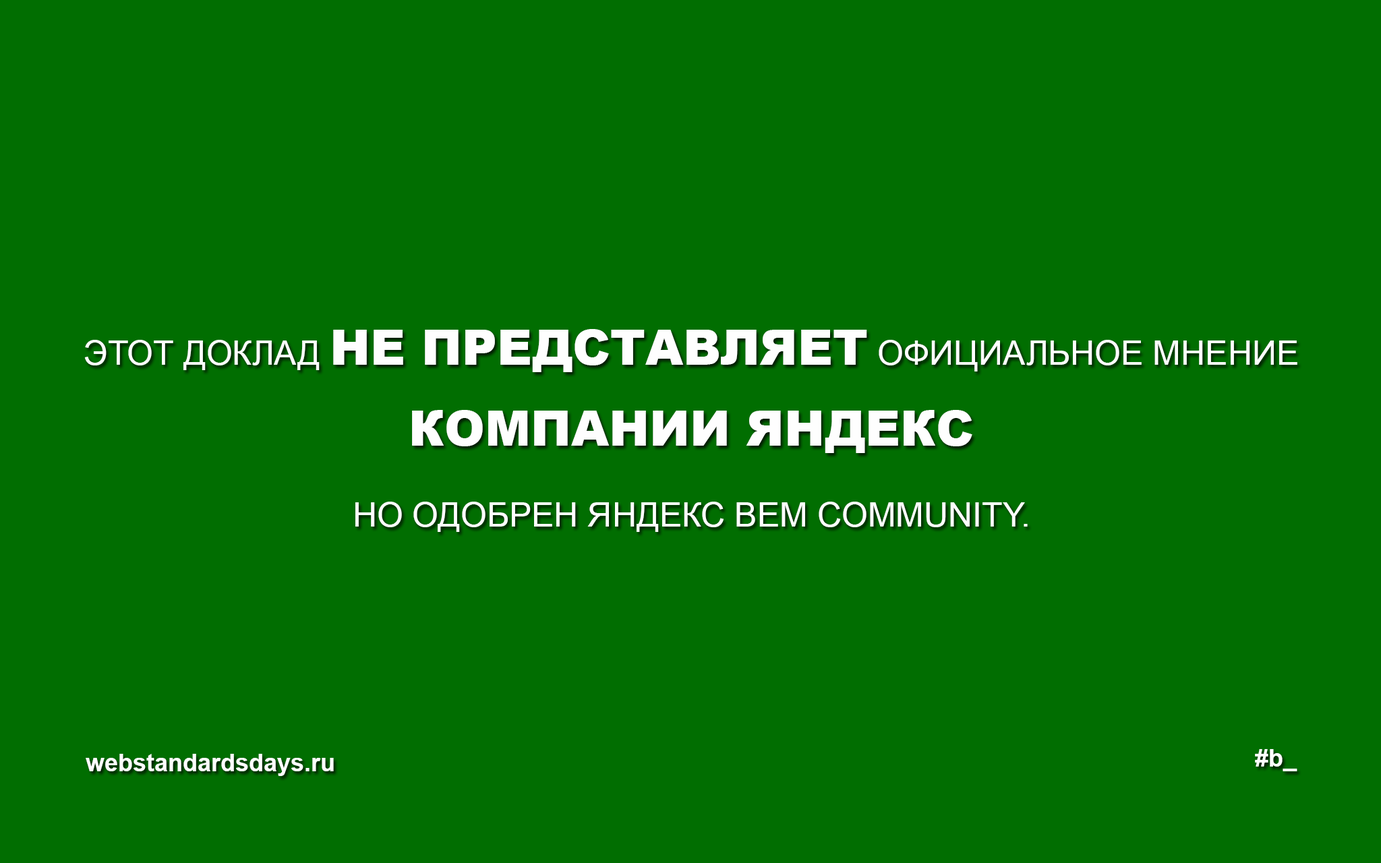
<style>
.page{position:relative;width:1381px;height:863px;background:#016e01}
.page>*{position:absolute;margin:0}
.t1{font:33.7px/80.9px "ArialMT";color:#fefefe;text-transform:uppercase}
.t2{font:48.6px/80.9px "Arial-Black";color:#fefefe;text-transform:uppercase}
.t3{font:24.3px "Arial-BoldMT";color:#fefefe}
</style>
<div class="page">
<p class="t1" style="left:84px;top:329px;width:1214px;height:203px;text-align:center">этот доклад <span class="t2">НЕ ПРЕДСТАВЛЯЕТ</span> официальное мнение<br><span class="t2">КОМПАНИИ ЯНДЕКС<br></span>но одобрен Яндекс BEM community.</p>
<p class="t3" style="left:1255px;top:749px;width:43px;height:23px">#b_</p>
<p class="t3" style="left:86px;top:754px;width:248px;height:22px">webstandardsdays.ru</p>
</div>
